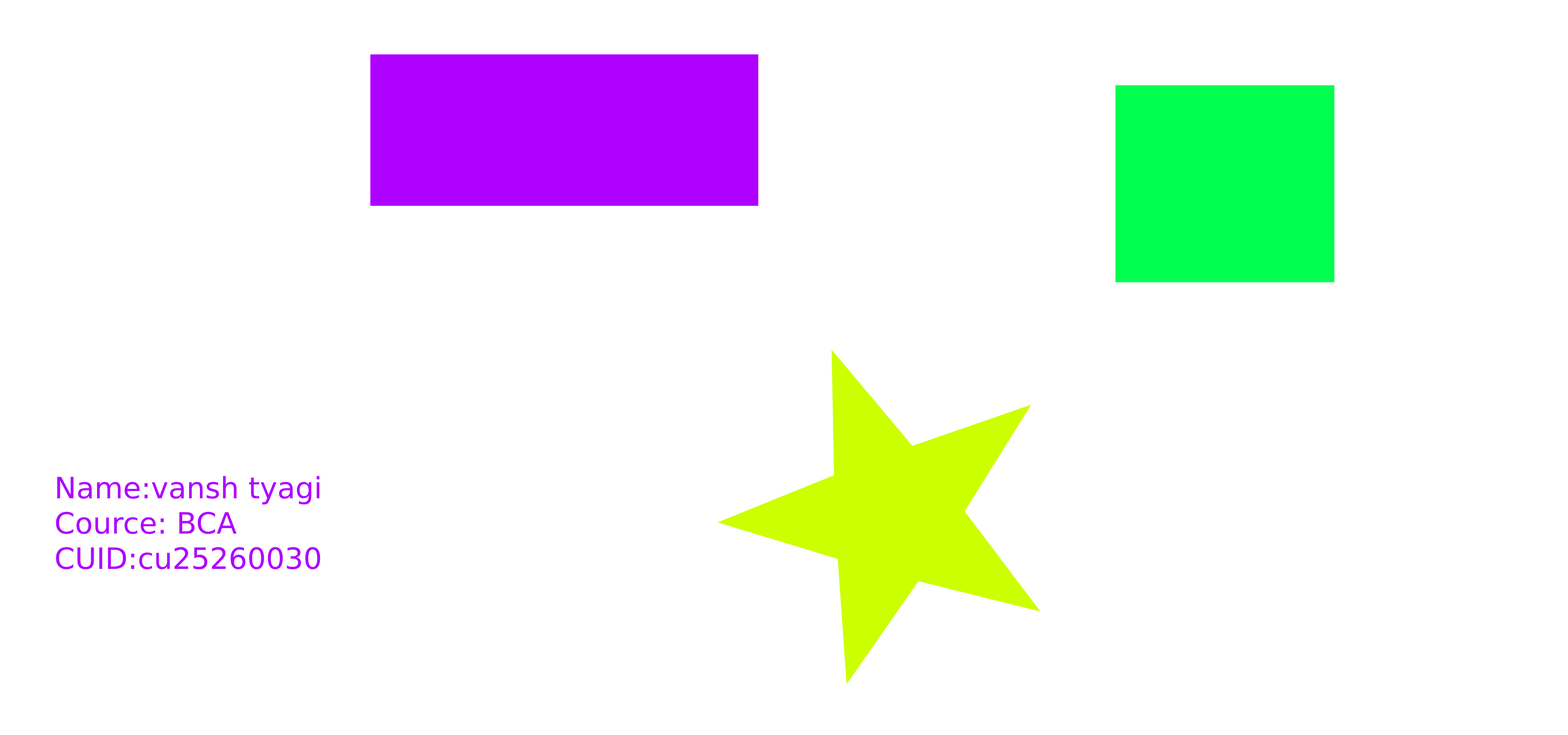
<style>
.page{position:relative;width:1568px;height:735px;background:#ffffff}
.page>*{position:absolute;margin:0}
.t1{font:29.4px "LucidaSans-Typewriter";color:#ae00ff}
</style>
<div class="page">
<p class="t1" style="left:56px;top:476px;width:264px;height:93px">Name:vansh tyagi<br>Cource: BCA<br>CUID:cu25260030</p>
</div>
